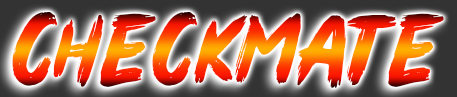
<style>
.page{position:relative;width:457px;height:97px}
.page>*{position:absolute;margin:0}
.t1{font:103.4px "Dirty-Brush"}
</style>
<div class="page">
<p class="t1" style="left:12px;top:11px;width:432px;height:77px">CHECKMATE</p>
</div>
